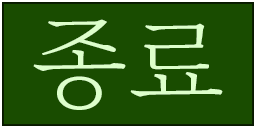
<style>
.page{position:relative;width:256px;height:128px;background:#194c00}
.page>*{position:absolute;margin:0}
.t1{font:100px "NotoSerifKR-ExtraLight";color:#ddffcc}
</style>
<div class="page">
<p class="t1" style="left:33px;top:19px;width:190px;height:91px">종료</p>
</div>
